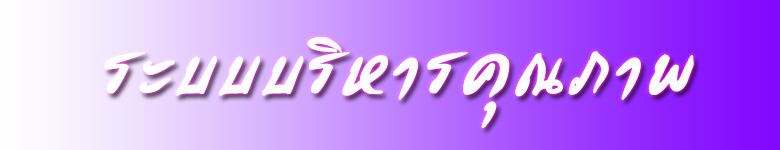
<style>
.page{position:relative;width:780px;height:150px}
.page>*{position:absolute;margin:0}
.t1{font:72px "LayijiJaRaKeFadHangv1.0";color:#ffffff}
</style>
<div class="page">
<p class="t1" style="left:104px;top:37px;width:590px;height:91px">ระบบบริหารคุณภาพ</p>
</div>
